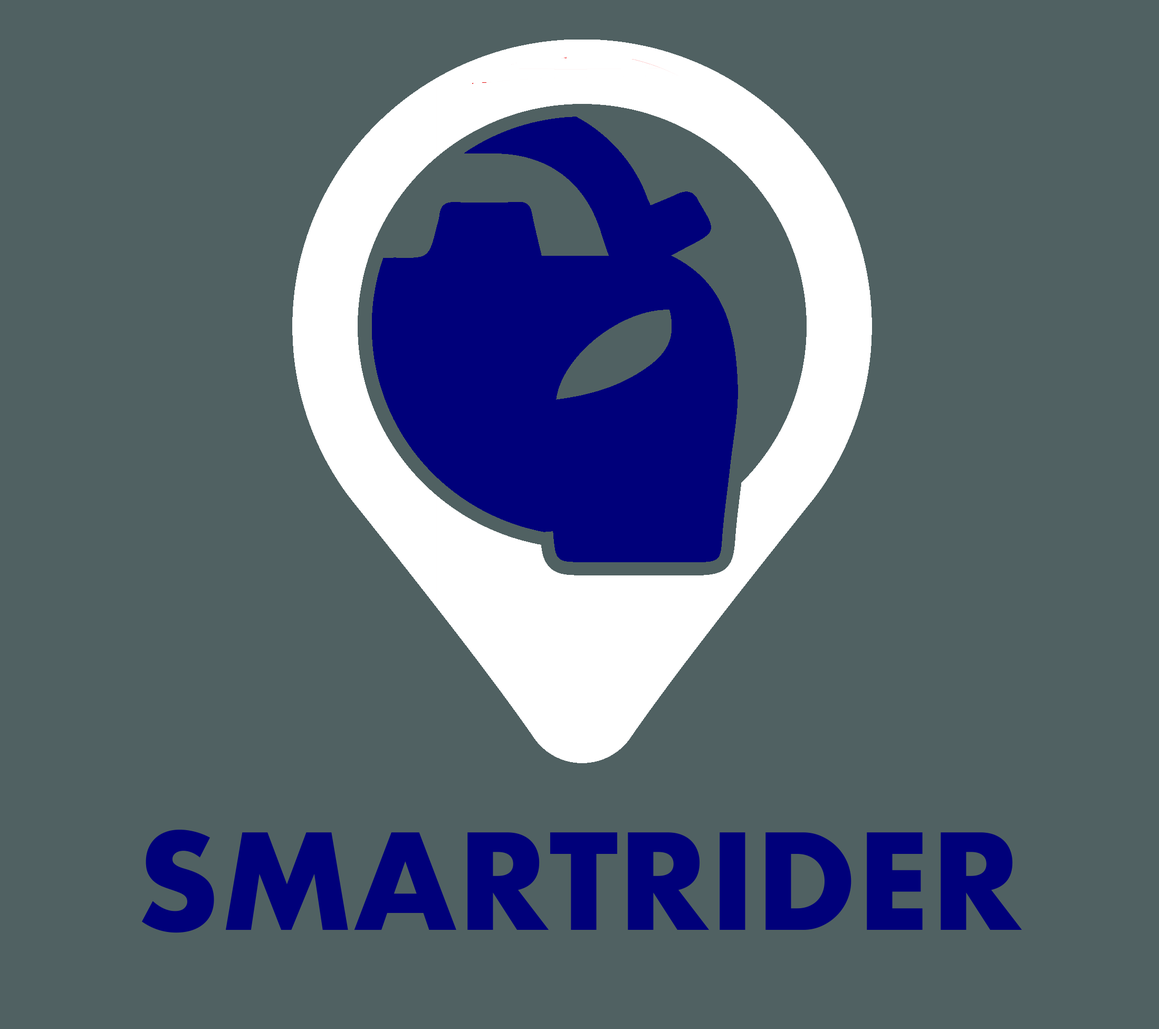
<style>
.page{position:relative;width:1159px;height:1029px;background:#506162}
.page>*{position:absolute;margin:0}
.t1{font:129.2px "Futura-Bold";color:#00007a}
</style>
<div class="page">
<p class="t1" style="left:142px;top:830px;width:880px;height:103px">SMARTRIDER</p>
</div>
